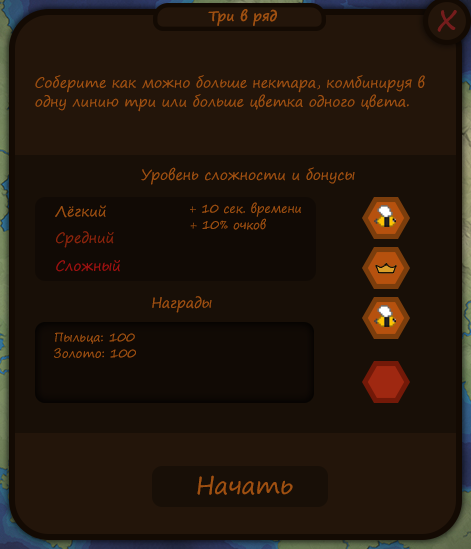
<style>
.page{position:relative;width:471px;height:549px;background:#23150a}
.page>*{position:absolute;margin:0}
.t1{font:14px "SegoePrint-Bold";color:#9f5011}
.t2{font:36px "SegoePrint";color:#751c1c}
.t3{font:14px/19px "SegoePrint";color:#9f5011}
.t4{font:14px "SegoePrint";color:#9f5011}
.t5{font:12px "SegoePrint";color:#9f5011}
.t6{font:14px "SegoePrint";color:#8a240c}
.t7{font:14px "SegoePrint";color:#9f1111}
.t8{font:24px "SegoePrint";color:#9f5011}
</style>
<div class="page">
<p class="t1" style="left:208px;top:9px;width:69px;height:17px">Три в ряд</p>
<p class="t2" style="left:437px;top:10px;width:20px;height:22px">x</p>
<p class="t3" style="left:35px;top:75px;width:390px;height:37px">Соберите как можно больше нектара, комбинируя в <br>одну линию три или больше цветка одного цвета.</p>
<p class="t4" style="left:141px;top:167px;width:214px;height:18px">Уровень сложности и бонусы</p>
<p class="t4" style="left:55px;top:205px;width:51px;height:13px">Лёгкий</p>
<p class="t5" style="left:190px;top:202px;width:111px;height:15px">+ 10 сек. времени</p>
<p class="t5" style="left:190px;top:218px;width:76px;height:12px">+ 10% очков</p>
<p class="t6" style="left:56px;top:231px;width:58px;height:17px">Средний</p>
<p class="t7" style="left:56px;top:260px;width:64px;height:12px">Сложный</p>
<p class="t4" style="left:152px;top:296px;width:60px;height:17px">Награды</p>
<p class="t5" style="left:55px;top:332px;width:80px;height:12px">Пыльца: 100</p>
<p class="t5" style="left:54px;top:348px;width:82px;height:10px">Золото: 100</p>
<p class="t8" style="left:197px;top:475px;width:96px;height:20px">Начать</p>
</div>
